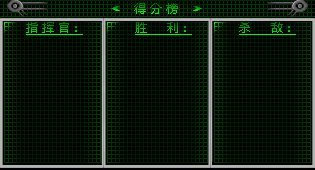
<style>
.page{position:relative;width:315px;height:170px;background:#000000}
.page>*{position:absolute;margin:0}
.t1{font:12px "MicrosoftYaHei"}
.t2{font:12px "MicrosoftYaHei";text-decoration:underline}
</style>
<div class="page">
<p class="t1" style="left:134px;top:3px;width:44px;height:11px">得 分 榜</p>
<p class="t2" style="left:26px;top:22px;width:57px;height:13px">指 挥 官：</p>
<p class="t2" style="left:135px;top:22px;width:57px;height:13px">胜     利：</p>
<p class="t2" style="left:239px;top:22px;width:57px;height:13px">杀     敌：</p>
</div>
